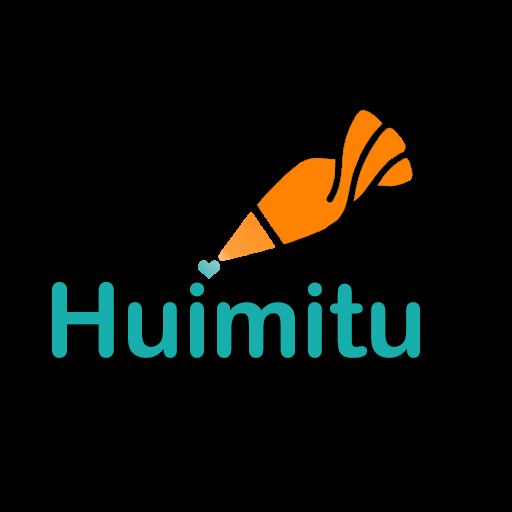
<style>
.page{position:relative;width:512px;height:512px;background:#000000}
.page>*{position:absolute;margin:0}
.t1{font:102px "ArialRoundedMTBold";color:#18aeac}
</style>
<div class="page">
<p class="t1" style="left:52px;top:282px;width:368px;height:76px">Huimitu</p>
</div>
